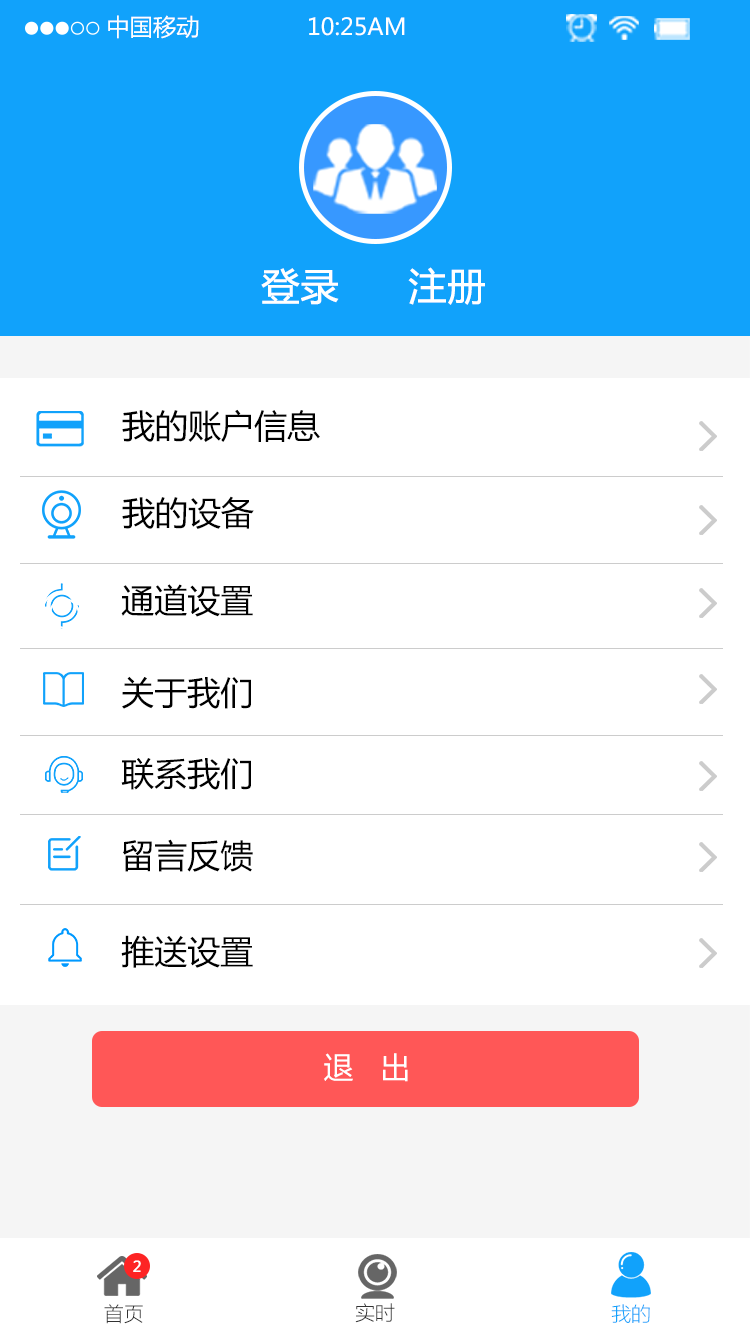
<style>
.page{position:relative;width:750px;height:1334px;background:#ffffff}
.page>*{position:absolute;margin:0}
.t1{font:23.3px "MicrosoftYaHei";color:#ffffff}
.t2{font:38px "MicrosoftYaHei";color:#ffffff;font-weight:bold}
.t3{font:33px "MicrosoftYaHei";color:#000000}
.t4{font:30px "MicrosoftYaHei";color:#ffffff}
.t5{font:11.1px "MicrosoftYaHei";color:#ffffff;font-weight:bold}
.t6{font:20px "MicrosoftYaHeiLight";color:#333333}
.t7{font:20px "MicrosoftYaHeiLight";color:#11a2fb}
</style>
<div class="page">
<p class="t1" style="left:108px;top:15px;width:91px;height:24px">中国移动</p>
<p class="t1" style="left:309px;top:17px;width:96px;height:19px">10:25AM</p>
<p class="t2" style="left:261px;top:268px;width:78px;height:37px">登录</p>
<p class="t2" style="left:408px;top:267px;width:77px;height:38px">注册</p>
<p class="t3" style="left:122px;top:409px;width:198px;height:33px">我的账户信息</p>
<p class="t3" style="left:122px;top:496px;width:132px;height:33px">我的设备</p>
<p class="t3" style="left:121px;top:584px;width:132px;height:33px">通道设置</p>
<p class="t3" style="left:122px;top:676px;width:129px;height:33px">关于我们</p>
<p class="t3" style="left:121px;top:758px;width:130px;height:32px">联系我们</p>
<p class="t3" style="left:123px;top:839px;width:130px;height:33px">留言反馈</p>
<p class="t3" style="left:121px;top:935px;width:132px;height:33px">推送设置</p>
<p class="t4" style="left:324px;top:1053px;width:84px;height:29px">退   出</p>
<p class="t5" style="left:133px;top:1260px;width:8px;height:12px">2</p>
<p class="t6" style="left:104px;top:1304px;width:39px;height:20px">首页</p>
<p class="t6" style="left:355px;top:1303px;width:40px;height:20px">实时</p>
<p class="t7" style="left:611px;top:1304px;width:39px;height:19px">我的</p>
</div>
